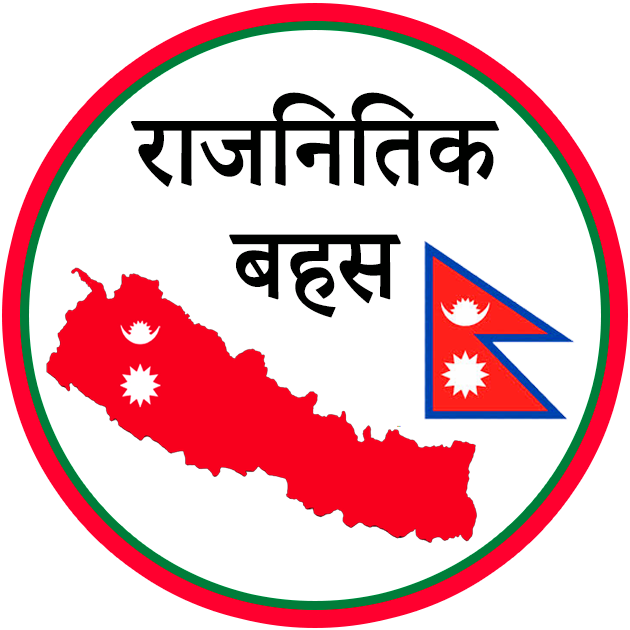
<style>
.page{position:relative;width:630px;height:630px;background:#ffffff}
.page>*{position:absolute;margin:0}
.t1{font:215.9px/113.5px "AdobeDevanagari-Bold";color:#000100;scale:0.94 1}
</style>
<div class="page">
<p class="t1" style="left:130px;top:92px;width:370px;height:226px;text-align:center">राजनितिक<br>बहस</p>
</div>
